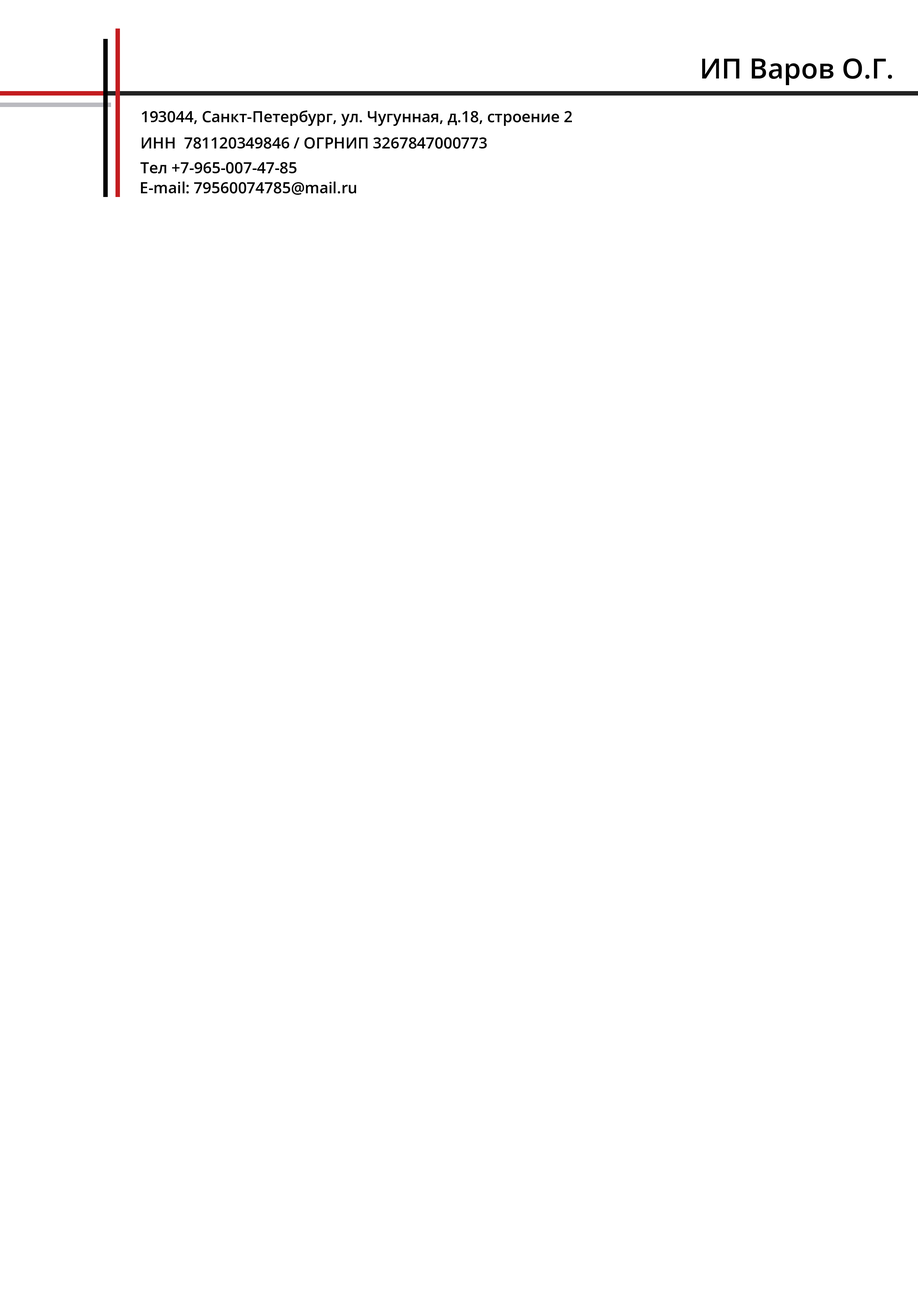
<style>
.page{position:relative;width:918px;height:1299px;background:#ffffff}
.page>*{position:absolute;margin:0}
.t1{font:27.8px "OpenSansRoman-SemiBold";color:#000000;font-weight:bold}
.t2{font:15.4px "OpenSansRoman-SemiBold";color:#000000;font-weight:bold}
</style>
<div class="page">
<p class="t1" style="left:702px;top:58px;width:190px;height:27px">ИП Варов О.Г.</p>
<p class="t2" style="left:142px;top:110px;width:430px;height:16px">193044, Санкт-Петербург, ул. Чугунная, д.18, строение 2</p>
<p class="t2" style="left:142px;top:137px;width:345px;height:12px">ИНН  781120349846 / ОГРНИП 3267847000773</p>
<p class="t2" style="left:140px;top:162px;width:157px;height:12px">Тел +7-965-007-47-85</p>
<p class="t2" style="left:141px;top:181px;width:215px;height:14px">E-mail: 79560074785@mail.ru</p>
</div>
